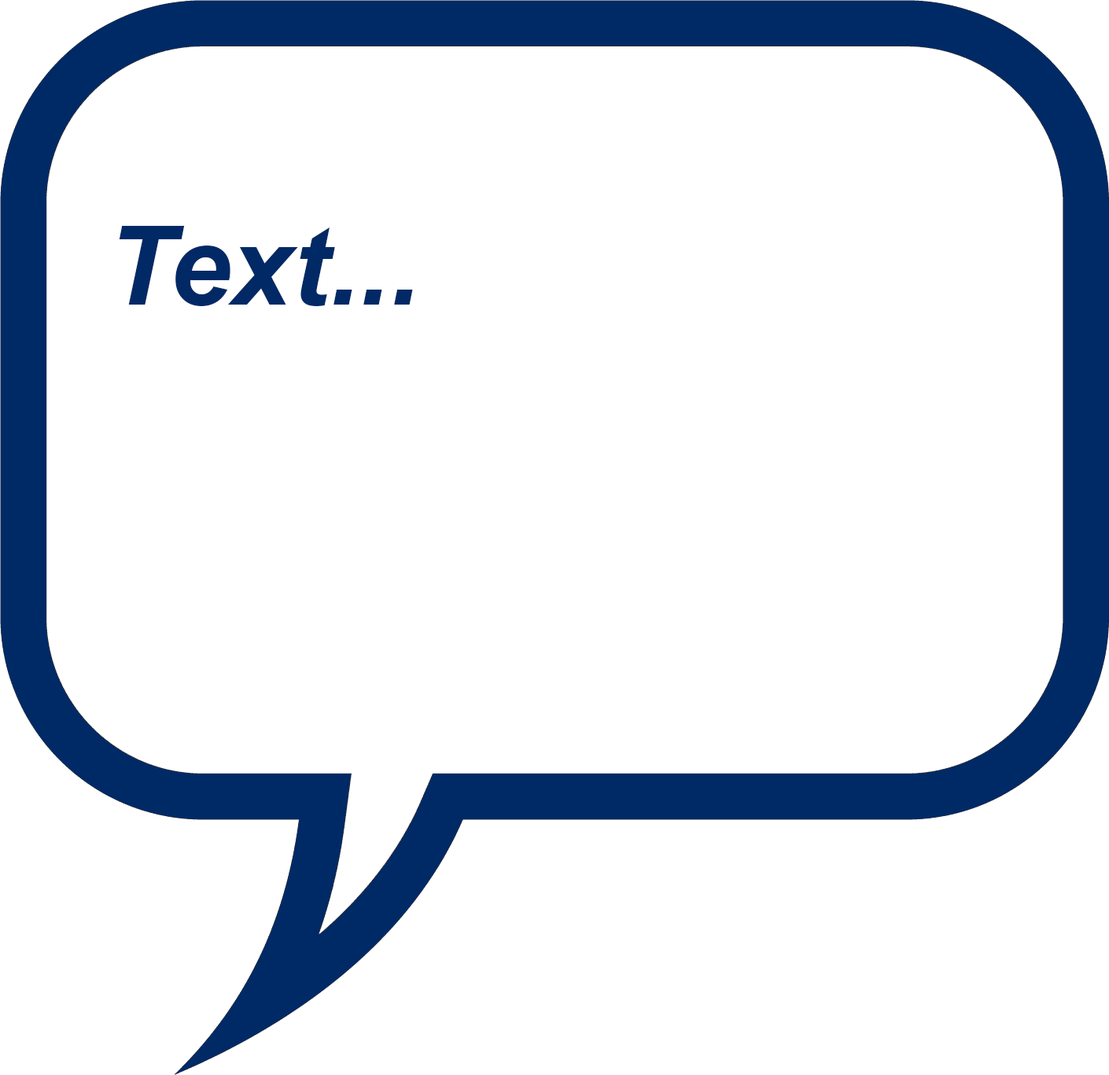
<style>
.page{position:relative;width:1109px;height:1075px;background:#ffffff}
.page>*{position:absolute;margin:0}
.t1{font:110.2px "Arial-BoldItalicMT";color:#002966}
</style>
<div class="page">
<p class="t1" style="left:119px;top:226px;width:294px;height:80px">Text...</p>
</div>
